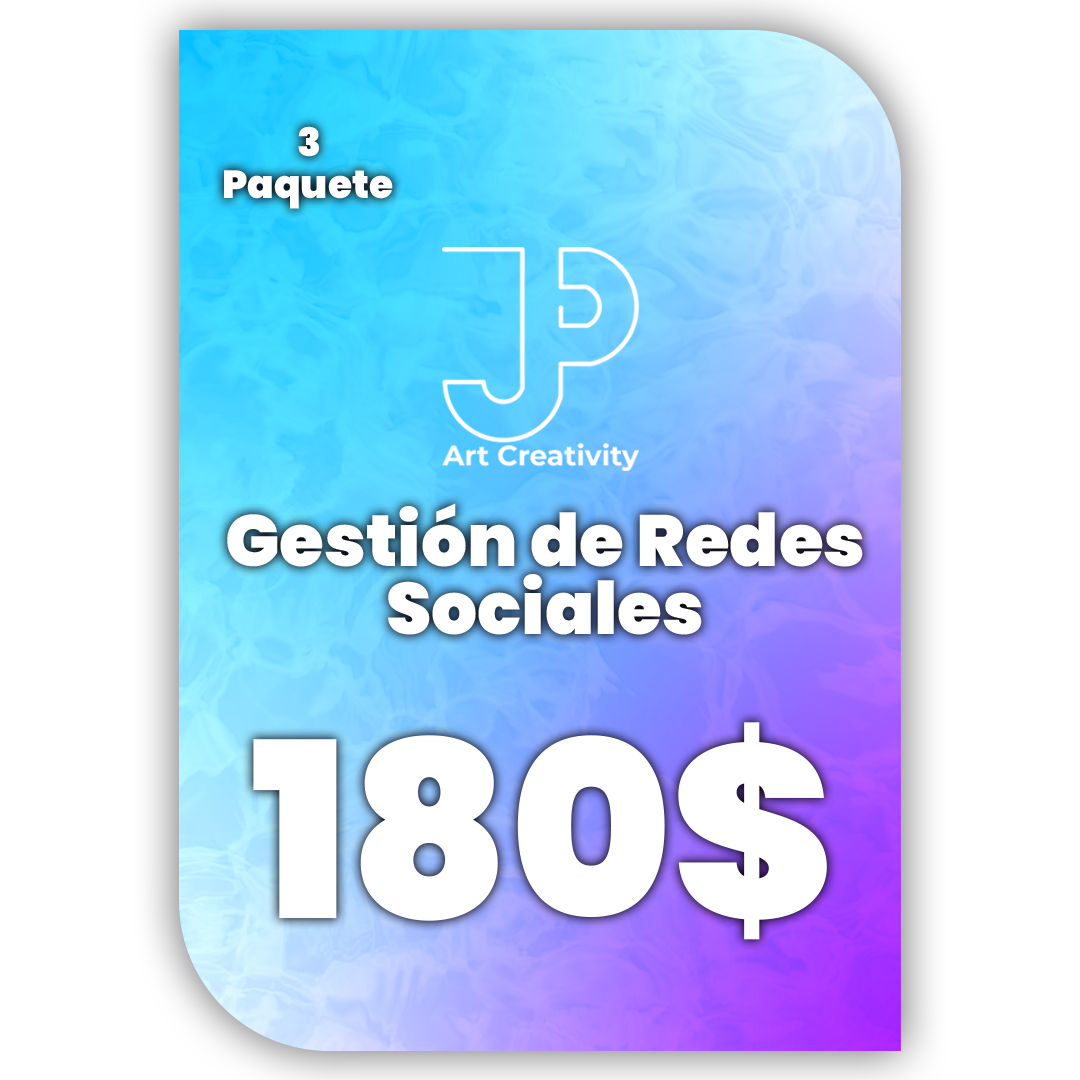
<style>
.page{position:relative;width:1080px;height:1080px;background:#ffffff}
.page>*{position:absolute;margin:0}
.t1{font:39.1px "Poppins-Black";color:#ffffff}
.t2{font:72.5px "Poppins-Black";color:#ffffff}
.t3{font:244.6px "Poppins-Black";color:#ffffff}
</style>
<div class="page">
<p class="t1" style="left:298px;top:126px;width:21px;height:31px">3</p>
<p class="t1" style="left:224px;top:170px;width:169px;height:39px">Paquete</p>
<p class="t2" style="left:227px;top:503px;width:636px;height:64px">Gestión de Redes</p>
<p class="t2" style="left:388px;top:574px;width:314px;height:61px">Sociales</p>
<p class="t3" style="left:253px;top:722px;width:574px;height:218px">180$</p>
</div>
